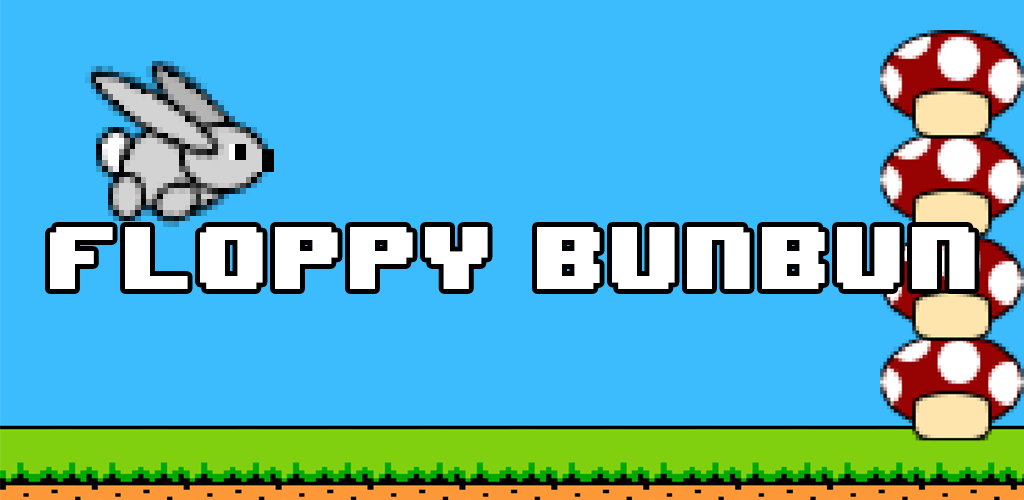
<style>
.page{position:relative;width:1024px;height:500px;background:#3cbcfc}
.page>*{position:absolute;margin:0}
.t1{font:75.3px "8BITWONDERNominal";color:#ffffff}
</style>
<div class="page">
<p class="t1" style="left:50px;top:227px;width:925px;height:62px">FLOPPY BUNBUN</p>
</div>
